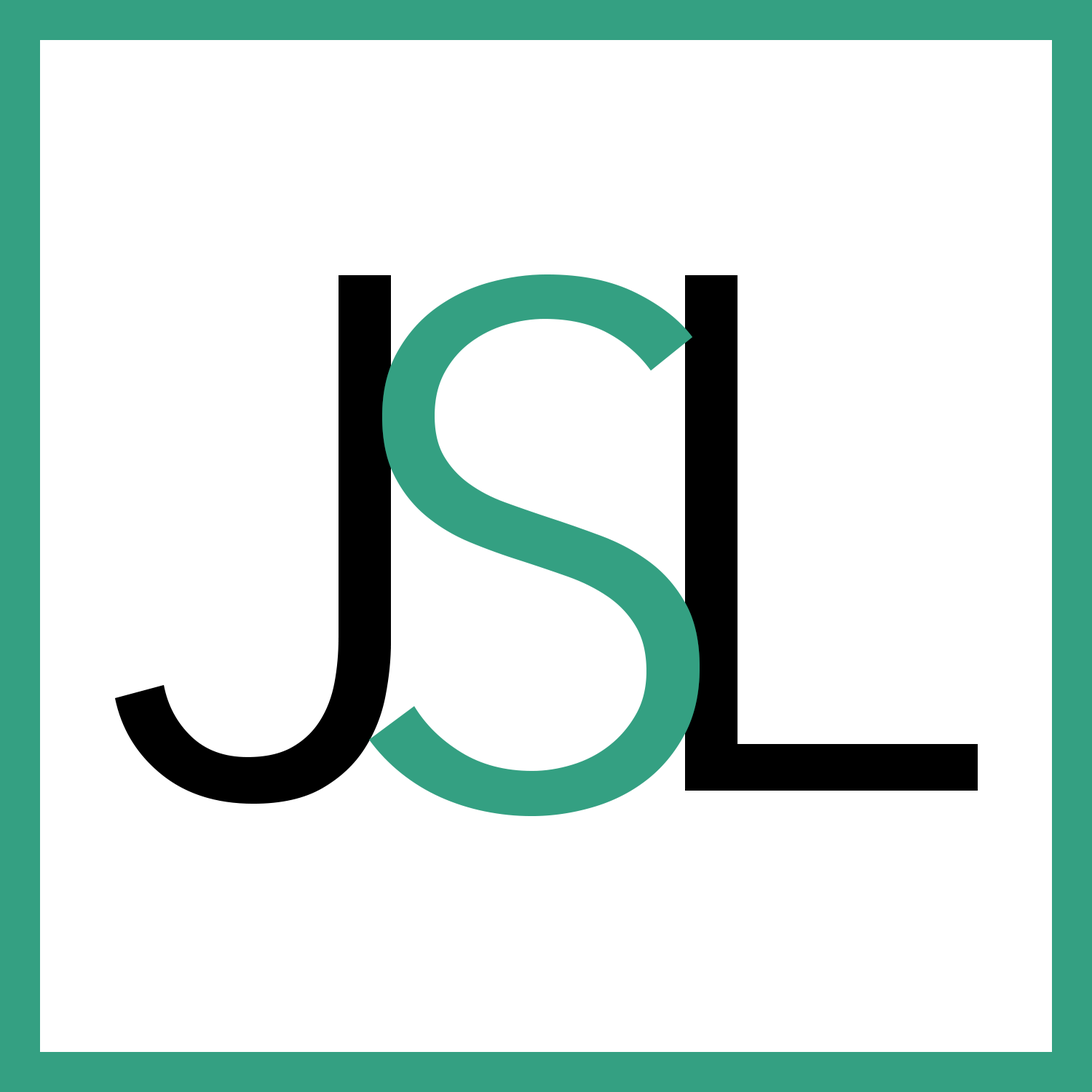
<style>
.page{position:relative;width:1092px;height:1092px;background:#ffffff}
.page>*{position:absolute;margin:0}
.t1{font:728px "AvenirNext-Regular";color:#000000}
.t2{font:728px "AvenirNext-Regular";color:#34a082}
</style>
<div class="page">
<p class="t1" style="left:115px;top:275px;width:276px;height:529px">J</p>
<p class="t2" style="left:369px;top:274px;width:331px;height:542px">S</p>
<p class="t1" style="left:685px;top:275px;width:293px;height:516px">L</p>
</div>
